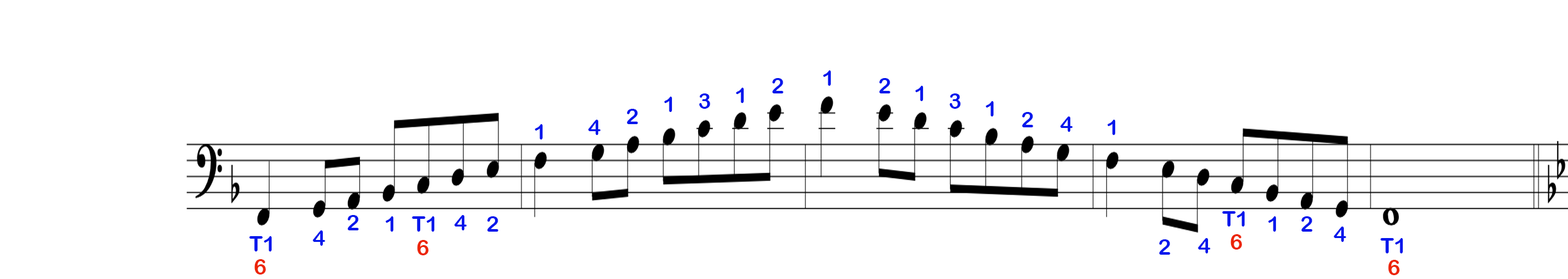
<style>
.page{position:relative;width:1568px;height:279px;background:#ffffff}
.page>*{position:absolute;margin:0}
.t1{font:21.8px "ArialRoundedMTBold";color:#0417ec}
.t2{font:21.8px "ArialRoundedMTBold";color:#ec2404}
</style>
<div class="page">
<p class="t1" style="left:823px;top:70px;width:8px;height:16px">1</p>
<p class="t1" style="left:736px;top:88px;width:8px;height:15px">1</p>
<p class="t1" style="left:772px;top:78px;width:11px;height:16px">2</p>
<p class="t1" style="left:879px;top:78px;width:11px;height:16px">2</p>
<p class="t1" style="left:915px;top:86px;width:9px;height:15px">1</p>
<p class="t1" style="left:664px;top:97px;width:9px;height:15px">1</p>
<p class="t1" style="left:699px;top:94px;width:11px;height:15px">3</p>
<p class="t1" style="left:949px;top:94px;width:12px;height:15px">3</p>
<p class="t1" style="left:986px;top:101px;width:8px;height:16px">1</p>
<p class="t1" style="left:626px;top:109px;width:12px;height:15px">2</p>
<p class="t1" style="left:1022px;top:112px;width:11px;height:15px">2</p>
<p class="t1" style="left:535px;top:124px;width:8px;height:16px">1</p>
<p class="t1" style="left:588px;top:120px;width:13px;height:15px">4</p>
<p class="t1" style="left:1060px;top:117px;width:13px;height:15px">4</p>
<p class="t1" style="left:1107px;top:120px;width:9px;height:15px">1</p>
<p class="t1" style="left:347px;top:215px;width:12px;height:16px">2</p>
<p class="t1" style="left:386px;top:216px;width:8px;height:16px">1</p>
<p class="t1" style="left:412px;top:216px;width:23px;height:16px">T1</p>
<p class="t1" style="left:454px;top:215px;width:13px;height:16px">4</p>
<p class="t1" style="left:487px;top:216px;width:11px;height:16px">2</p>
<p class="t1" style="left:1222px;top:211px;width:23px;height:16px">T1</p>
<p class="t1" style="left:1268px;top:216px;width:9px;height:16px">1</p>
<p class="t1" style="left:1301px;top:216px;width:11px;height:16px">2</p>
<p class="t1" style="left:313px;top:231px;width:12px;height:15px">4</p>
<p class="t1" style="left:1334px;top:227px;width:12px;height:15px">4</p>
<p class="t1" style="left:249px;top:236px;width:23px;height:16px">T1</p>
<p class="t2" style="left:417px;top:240px;width:12px;height:16px">6</p>
<p class="t1" style="left:1159px;top:240px;width:11px;height:15px">2</p>
<p class="t1" style="left:1198px;top:238px;width:13px;height:16px">4</p>
<p class="t2" style="left:1230px;top:234px;width:12px;height:16px">6</p>
<p class="t1" style="left:1380px;top:238px;width:23px;height:16px">T1</p>
<p class="t2" style="left:254px;top:259px;width:12px;height:16px">6</p>
<p class="t2" style="left:1388px;top:260px;width:12px;height:15px">6</p>
</div>
